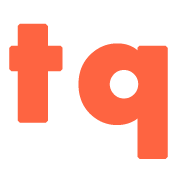
<style>
.page{position:relative;width:180px;height:180px;background:#ffffff}
.page>*{position:absolute;margin:0}
.t1{font:160px "Aharoni-Bold";letter-spacing:0.06em;color:#fe6441;font-weight:bold}
</style>
<div class="page">
<p class="t1" style="left:9px;top:23px;width:159px;height:136px">tq</p>
</div>
